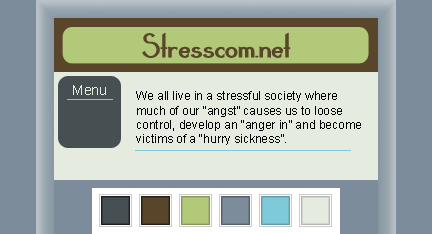
<style>
.page{position:relative;width:432px;height:234px;background:#e5ebdf}
.page>*{position:absolute;margin:0}
.t1{font:24px "Claritty_Bold";color:#59452a}
.t2{font:14px "ArialMT";color:#e5ebdf}
.t3{font:12px "ArialMT";color:#000000}
</style>
<div class="page">
<p class="t1" style="left:142px;top:32px;width:149px;height:26px">Stresscom.net</p>
<p class="t2" style="left:73px;top:85px;width:33px;height:10px">Menu</p>
<p class="t3" style="left:136px;top:91px;width:225px;height:54px">We all live in a stressful society where <br>much of our “angst” causes us to loose <br>control, develop an “anger in” and become <br>victims of a “hurry sickness”.</p>
</div>
